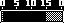
<style>
.page{position:relative;width:64px;height:23px;background:#000000}
.page>*{position:absolute;margin:0}
.t1{font:16px "Gamer";color:#f6f6f6}
</style>
<div class="page">
<p class="t1" style="left:0px;top:0px;width:5px;height:6px">0</p>
<p class="t1" style="left:14px;top:0px;width:5px;height:6px">5</p>
<p class="t1" style="left:26px;top:0px;width:10px;height:6px">10</p>
<p class="t1" style="left:41px;top:0px;width:10px;height:6px">15</p>
<p class="t1" style="left:59px;top:0px;width:5px;height:6px">0</p>
</div>
